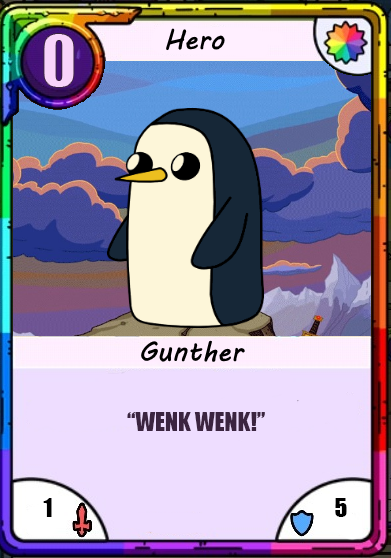
<style>
.page{position:relative;width:391px;height:558px}
.page>*{position:absolute;margin:0}
.t1{font:66.7px "Impact";color:#f8d4fa}
.t2{font:24px "Impact";color:#3b2440}
.t3{font:24px "Impact";color:#000000}
</style>
<div class="page">
<p class="t1" style="left:43px;top:33px;width:32px;height:55px">0</p>
<p class="t2" style="left:127px;top:412px;width:138px;height:19px">“WENK WENK!”</p>
<p class="t3" style="left:43px;top:498px;width:9px;height:19px">1</p>
<p class="t3" style="left:335px;top:498px;width:12px;height:19px">5</p>
</div>
